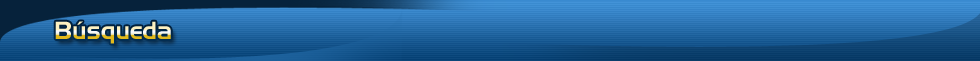
<style>
.page{position:relative;width:980px;height:61px}
.page>*{position:absolute;margin:0}
.t1{font:24px "HandelGothicBT-Regular"}
</style>
<div class="page">
<p class="t1" style="left:55px;top:21px;width:116px;height:23px">Búsqueda</p>
</div>
